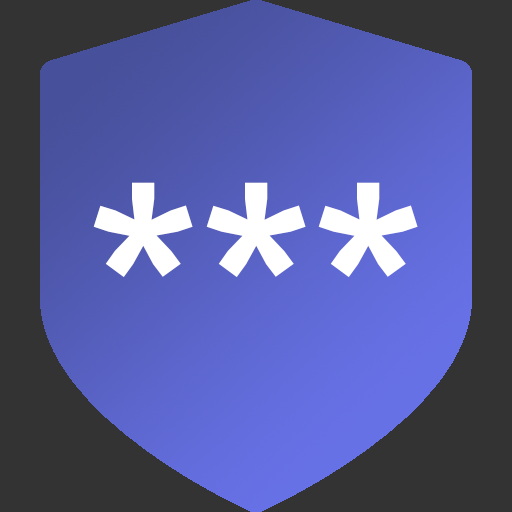
<style>
.page{position:relative;width:512px;height:512px;background:#333333}
.page>*{position:absolute;margin:0}
.t1{font:275px "KohinoorGujarati-Medium";color:#ffffff}
</style>
<div class="page">
<p class="t1" style="left:93px;top:182px;width:325px;height:95px">***</p>
</div>
